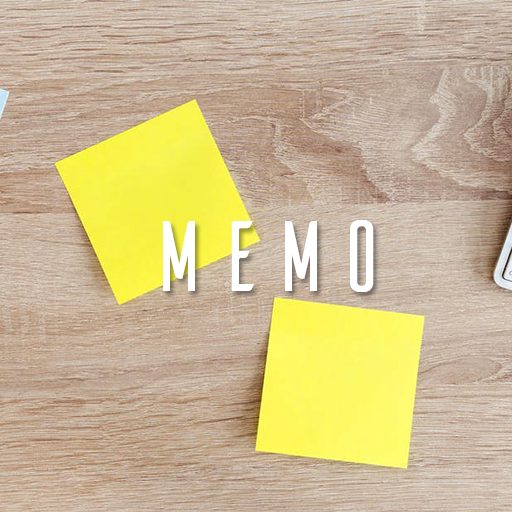
<style>
.page{position:relative;width:512px;height:512px}
.page>*{position:absolute;margin:0}
.t1{font:100px "Ailerons-Regular";color:#ffffff}
</style>
<div class="page">
<p class="t1" style="left:163px;top:220px;width:211px;height:72px">MEMO</p>
</div>
